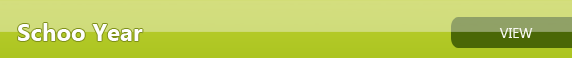
<style>
.page{position:relative;width:572px;height:58px}
.page>*{position:absolute;margin:0}
.t1{font:24px "SegoeUI-Bold";color:#fefefe}
.t2{font:14px "SegoeUI";color:#f6f7f1}
</style>
<div class="page">
<p class="t1" style="left:18px;top:23px;width:125px;height:18px">Schoo Year</p>
<p class="t2" style="left:499px;top:28px;width:34px;height:10px">VIEW</p>
</div>
